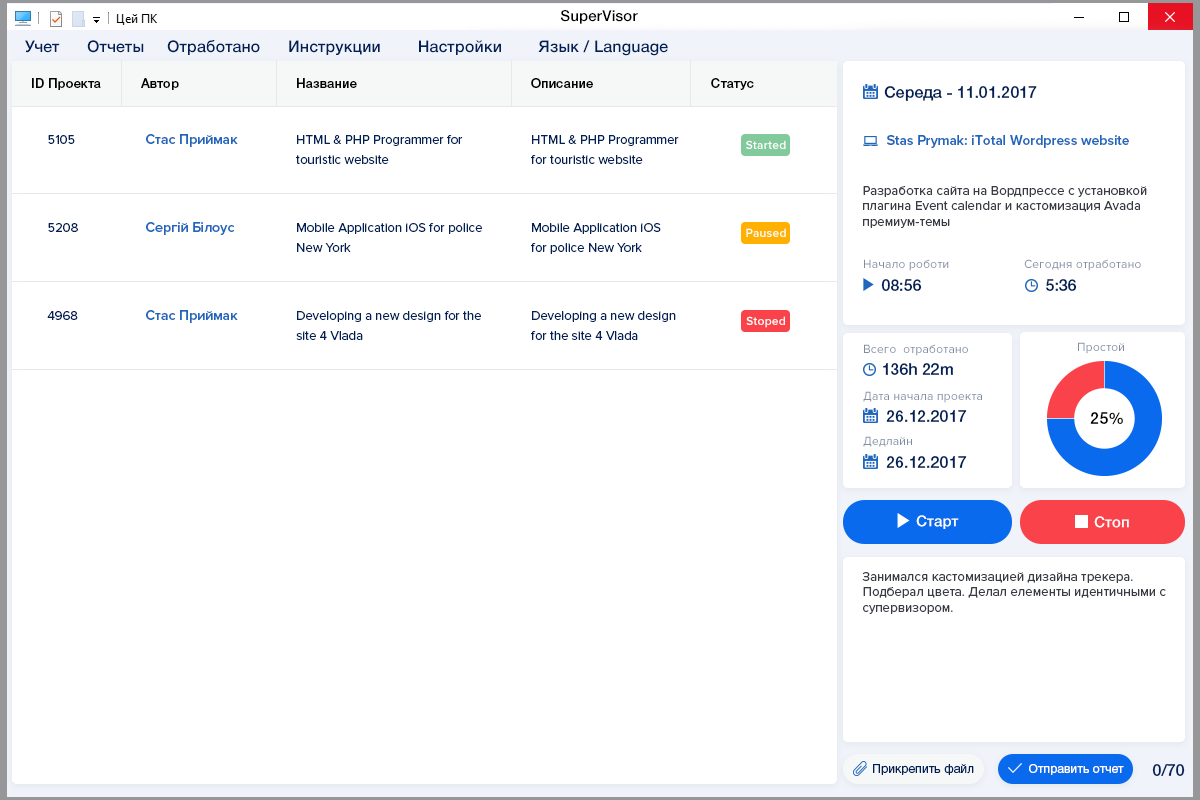
<style>
.page{position:relative;width:1200px;height:800px;background:#ffffff}
.page>*{position:absolute;margin:0}
.t1{font:15px "HelveticaNeueCyr-Medium";letter-spacing:0.01em;color:#000000}
.t2{font:16px "HelveticaNeueCyr-Medium";letter-spacing:0.01em;color:#002157}
.t3{font:13px "HelveticaNeueCyr-Medium";letter-spacing:0.01em;color:#000000}
.t4{font:16px "HelveticaNeueCyr-Medium";color:#002157}
.t5{font:13px "ProximaNova-Regular";color:#002157}
.t6{font:14px "ProximaNova-Semibold";color:#2066bc}
.t7{font:13px/20px "ProximaNova-Regular";color:#002157}
.t8{font:12px "ProximaNova-Semibold";letter-spacing:0.02em;color:#ffffff}
.t9{font:13px "ProximaNova-Regular";letter-spacing:0.01em;color:#393b45}
.t10{font:12px "ProximaNova-Regular";letter-spacing:0.02em;color:#7f8ca2}
.t11{font:16px "HelveticaNeueCyr-Medium";letter-spacing:0.01em;color:#000000}
.t12{font:15px "HelveticaNeueCyr-Medium";letter-spacing:0.01em;color:#fefefe}
.t13{font:12px "HelveticaNeueCyr-Roman";letter-spacing:0.01em;color:#002157}
.t14{font:12px "HelveticaNeueCyr-Roman";letter-spacing:0.01em;color:#ffffff}
</style>
<div class="page">
<p class="t1" style="left:561px;top:10px;width:77px;height:14px">SuperVisor</p>
<p class="t2" style="left:25px;top:40px;width:643px;height:16px">Учет      Отчеты     Отработано      Инструкции        Настройки        Язык / Language</p>
<p class="t3" style="left:32px;top:78px;width:69px;height:12px">ID Проекта</p>
<p class="t3" style="left:141px;top:78px;width:38px;height:12px">Автор</p>
<p class="t3" style="left:297px;top:78px;width:60px;height:10px">Название</p>
<p class="t3" style="left:531px;top:78px;width:62px;height:10px">Описание</p>
<p class="t3" style="left:711px;top:78px;width:43px;height:12px">Статус</p>
<p class="t4" style="left:884px;top:86px;width:153px;height:15px">Середа - 11.01.2017</p>
<p class="t5" style="left:48px;top:135px;width:27px;height:9px">5105</p>
<p class="t6" style="left:146px;top:134px;width:92px;height:13px">Стас Приймак</p>
<p class="t7" style="left:296px;top:135px;width:167px;height:29px">HTML &amp; PHP Programmer for touristic website</p>
<p class="t7" style="left:531px;top:135px;width:148px;height:29px">HTML &amp; PHP Programmer for touristic website</p>
<p class="t6" style="left:887px;top:135px;width:242px;height:13px">Stas Prymak: iTotal Wordpress website</p>
<p class="t8" style="left:746px;top:140px;width:40px;height:9px">Started</p>
<p class="t9" style="left:863px;top:186px;width:284px;height:42px">Разработка сайта на Вордпрессе с установкой плагина Event calendar и кастомизация Avada премиум-темы</p>
<p class="t6" style="left:146px;top:222px;width:89px;height:13px">Сергій Білоус</p>
<p class="t5" style="left:48px;top:223px;width:30px;height:9px">5208</p>
<p class="t7" style="left:297px;top:223px;width:185px;height:29px">Mobile Application iOS for police New York</p>
<p class="t7" style="left:531px;top:223px;width:130px;height:31px">Mobile Application iOS for police New York</p>
<p class="t8" style="left:746px;top:228px;width:40px;height:9px">Paused</p>
<p class="t10" style="left:864px;top:259px;width:85px;height:12px">Начало роботи</p>
<p class="t10" style="left:1024px;top:259px;width:117px;height:12px">Сегодня отработано</p>
<p class="t4" style="left:881px;top:279px;width:41px;height:12px">08:56</p>
<p class="t4" style="left:1046px;top:279px;width:31px;height:12px">5:36</p>
<p class="t5" style="left:47px;top:311px;width:31px;height:9px">4968</p>
<p class="t6" style="left:146px;top:310px;width:92px;height:13px">Стас Приймак</p>
<p class="t7" style="left:296px;top:311px;width:185px;height:29px">Developing a new design for the site 4 Vlada</p>
<p class="t7" style="left:531px;top:311px;width:145px;height:29px">Developing a new design for the site 4 Vlada</p>
<p class="t8" style="left:746px;top:316px;width:39px;height:12px">Stoped</p>
<p class="t10" style="left:1078px;top:342px;width:46px;height:12px">Простой</p>
<p class="t10" style="left:864px;top:344px;width:104px;height:12px">Всего  отработано</p>
<p class="t4" style="left:883px;top:363px;width:70px;height:12px">136h 22m</p>
<p class="t10" style="left:863px;top:391px;width:119px;height:12px">Дата начала проекта</p>
<p class="t4" style="left:886px;top:410px;width:81px;height:12px">26.12.2017</p>
<p class="t11" style="left:1090px;top:412px;width:33px;height:13px">25%</p>
<p class="t10" style="left:863px;top:436px;width:49px;height:11px">Дедлайн</p>
<p class="t4" style="left:886px;top:456px;width:81px;height:12px">26.12.2017</p>
<p class="t12" style="left:916px;top:515px;width:43px;height:14px">Старт</p>
<p class="t12" style="left:1094px;top:516px;width:35px;height:12px">Стоп</p>
<p class="t9" style="left:862px;top:572px;width:304px;height:42px">Занимался кастомизацией дизайна трекера. Подберал цвета. Делал елементы идентичными с супервизором.</p>
<p class="t13" style="left:873px;top:764px;width:101px;height:11px">Прикрепить файл</p>
<p class="t14" style="left:1029px;top:764px;width:95px;height:11px">Отправить отчет</p>
<p class="t4" style="left:1152px;top:764px;width:33px;height:12px">0/70</p>
</div>
